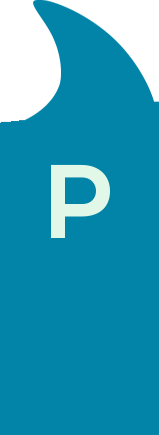
<style>
.page{position:relative;width:159px;height:435px;background:#0284a8}
.page>*{position:absolute;margin:0}
.t1{font:100px "FONTSPRINGDEMO-GeometosNeueBoldRegular";color:#e1f7e7}
</style>
<div class="page">
<p class="t1" style="left:51px;top:164px;width:59px;height:74px">P</p>
</div>
